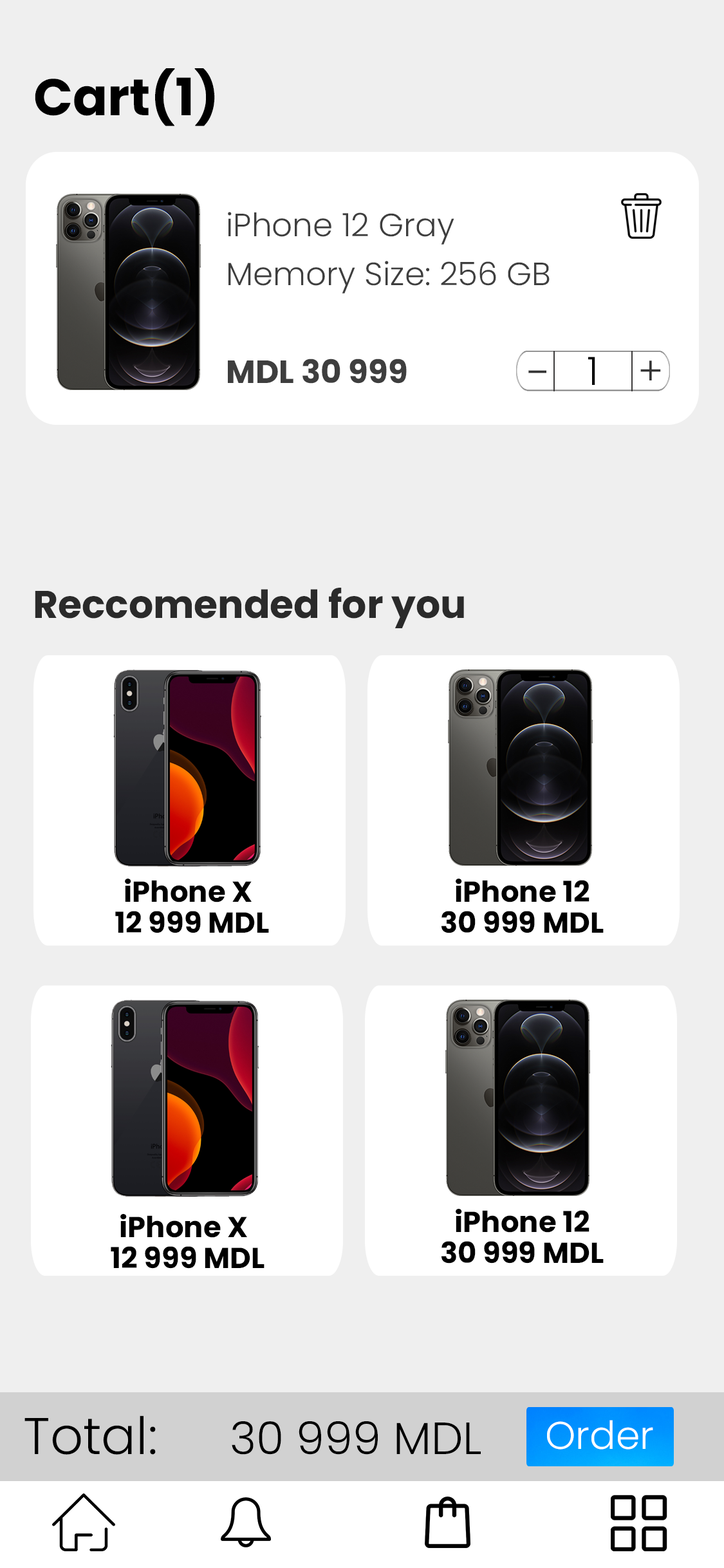
<style>
.page{position:relative;width:724px;height:1568px;background:#efefef}
.page>*{position:absolute;margin:0}
.t1{font:51.5px "Poppins-Bold";color:#000000}
.t2{font:32.2px "Poppins-Light";color:#3e3e3e}
.t3{font:32.2px "Poppins-Bold";color:#3e3e3e}
.t4{font:39px "Poppins-Light";color:#000000}
.t5{font:39px "Poppins-Light";color:#343434}
.t6{font:46px "Poppins-Light";color:#343434}
.t7{font:38.6px "Poppins-Bold";color:#2a2a2a}
.t8{font:29px "Poppins-Bold";color:#000000}
.t9{font:51.5px "Poppins-Light";color:#000000}
.t10{font:45.1px "Poppins-Light";color:#000000}
.t11{font:38.6px "Poppins-Light";color:#ffffff}
</style>
<div class="page">
<p class="t1" style="left:35px;top:68px;width:180px;height:58px">Cart(1)</p>
<p class="t2" style="left:228px;top:212px;width:226px;height:33px">iPhone 12 Gray</p>
<p class="t2" style="left:229px;top:261px;width:321px;height:33px">Memory Size: 256 GB</p>
<p class="t3" style="left:228px;top:359px;width:179px;height:25px">MDL 30 999</p>
<p class="t4" style="left:588px;top:357px;width:7px;height:28px">1</p>
<p class="t5" style="left:640px;top:360px;width:21px;height:20px">+</p>
<p class="t6" style="left:528px;top:370px;width:18px;height:3px">-</p>
<p class="t7" style="left:35px;top:588px;width:429px;height:40px">Reccomended for you</p>
<p class="t8" style="left:125px;top:879px;width:127px;height:23px">iPhone X</p>
<p class="t8" style="left:456px;top:879px;width:134px;height:23px">iPhone 12</p>
<p class="t8" style="left:115px;top:911px;width:154px;height:22px">12 999 MDL</p>
<p class="t8" style="left:442px;top:911px;width:162px;height:22px">30 999 MDL</p>
<p class="t8" style="left:120px;top:1214px;width:127px;height:24px">iPhone X</p>
<p class="t8" style="left:456px;top:1209px;width:134px;height:24px">iPhone 12</p>
<p class="t8" style="left:442px;top:1241px;width:162px;height:23px">30 999 MDL</p>
<p class="t8" style="left:111px;top:1246px;width:154px;height:23px">12 999 MDL</p>
<p class="t9" style="left:24px;top:1415px;width:132px;height:40px">Total:</p>
<p class="t10" style="left:232px;top:1421px;width:249px;height:34px">30 999 MDL</p>
<p class="t11" style="left:547px;top:1420px;width:106px;height:30px">Order</p>
</div>
